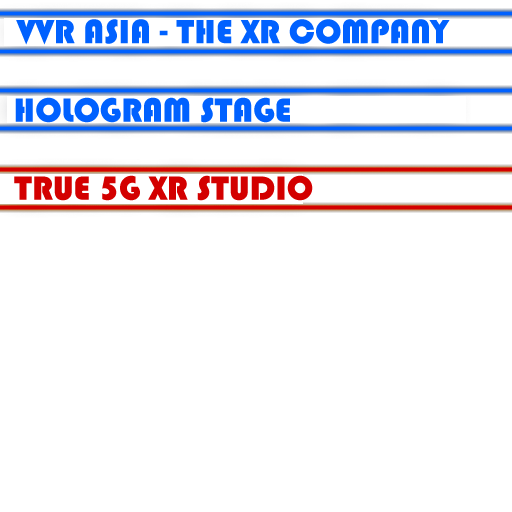
<style>
.page{position:relative;width:512px;height:512px;background:#ffffff}
.page>*{position:absolute;margin:0}
.t1{font:35px "Bauhaus93";color:#0061ff}
.t2{font:35px "Bauhaus93";color:#d30000}
</style>
<div class="page">
<p class="t1" style="left:16px;top:19px;width:434px;height:26px">VVR ASIA - THE XR COMPANY</p>
<p class="t1" style="left:15px;top:97px;width:275px;height:26px">HOLOGRAM STAGE</p>
<p class="t2" style="left:14px;top:175px;width:299px;height:26px">TRUE 5G XR STUDIO</p>
</div>
